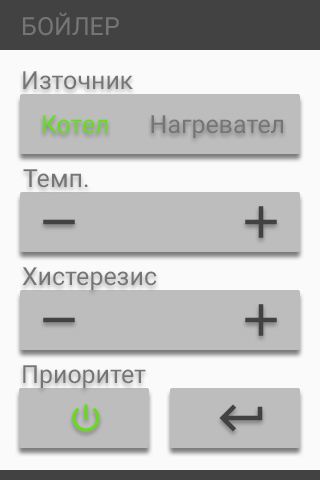
<style>
.page{position:relative;width:320px;height:480px;background:#bdbdbd}
.page>*{position:absolute;margin:0}
.t1{font:25px "Roboto-Regular";color:#757575}
.t2{font:25px "Roboto-Regular";color:#64dd17}
</style>
<div class="page">
<p class="t1" style="left:23px;top:12px;width:96px;height:24px">БОЙЛЕР</p>
<p class="t1" style="left:23px;top:71px;width:110px;height:19px">Източник</p>
<p class="t2" style="left:43px;top:115px;width:65px;height:19px">Котел</p>
<p class="t1" style="left:151px;top:115px;width:132px;height:23px">Нагревател</p>
<p class="t1" style="left:23px;top:169px;width:65px;height:19px">Темп.</p>
<p class="t1" style="left:22px;top:267px;width:135px;height:23px">Хистерезис</p>
<p class="t1" style="left:23px;top:365px;width:123px;height:23px">Приоритет</p>
</div>
